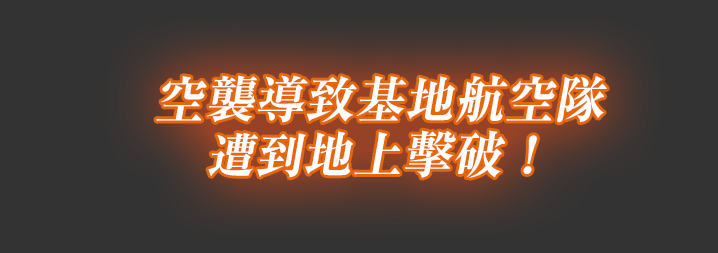
<style>
.page{position:relative;width:718px;height:253px;background:#333333}
.page>*{position:absolute;margin:0}
.t1{font:50px/55px "RyuminPr6N-ExBold";color:#ffffff;font-style:italic}
.t2{font:48px/55px "RyuminPr6N-ExBold";color:#ffffff;font-style:italic}
</style>
<div class="page">
<p class="t1" style="left:156px;top:75px;width:451px;height:103px;text-align:center">空襲導致基地航空隊<br><span class="t2">遭到</span>地上擊破！</p>
</div>
